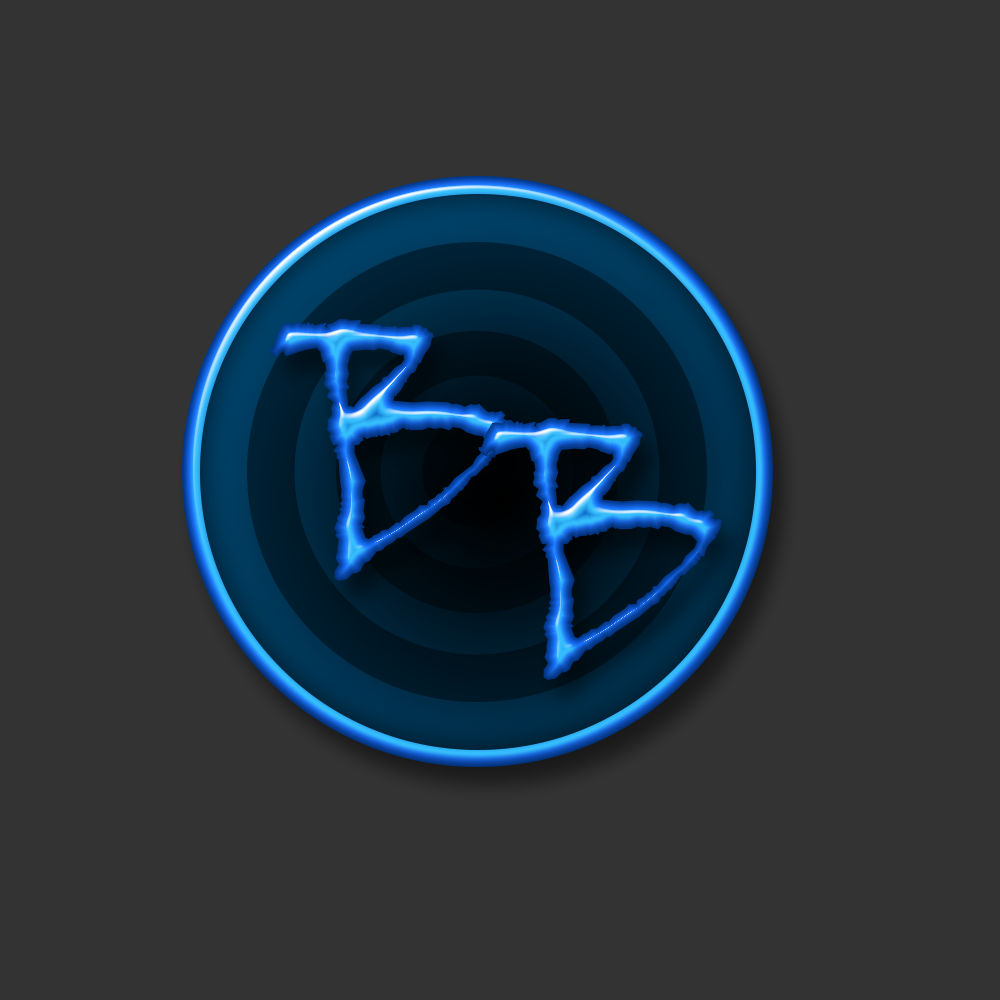
<style>
.page{position:relative;width:1000px;height:1000px;background:#333333}
.page>*{position:absolute;margin:0}
.t1{font:312.5px "VinerHandITC"}
</style>
<div class="page">
<p class="t1" style="left:269px;top:319px;width:244px;height:262px;rotate:-15deg">B</p>
<p class="t1" style="left:478px;top:418px;width:244px;height:262px;rotate:-15deg">B</p>
</div>
